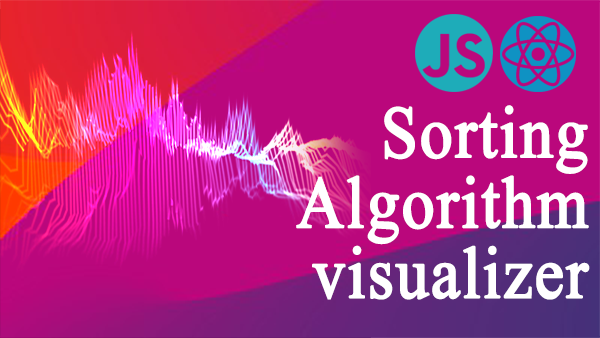
<style>
.page{position:relative;width:600px;height:338px;background:#ba077c}
.page>*{position:absolute;margin:0}
.t1{font:73.1px/37.1px "IskoolaPota";letter-spacing:0.01em;color:#ffffff;font-weight:bold;scale:0.89 1}
</style>
<div class="page">
<p class="t1" style="left:296px;top:105px;width:294px;height:195px;text-align:right">Sorting<br>Algorithm<br>visualizer</p>
</div>
